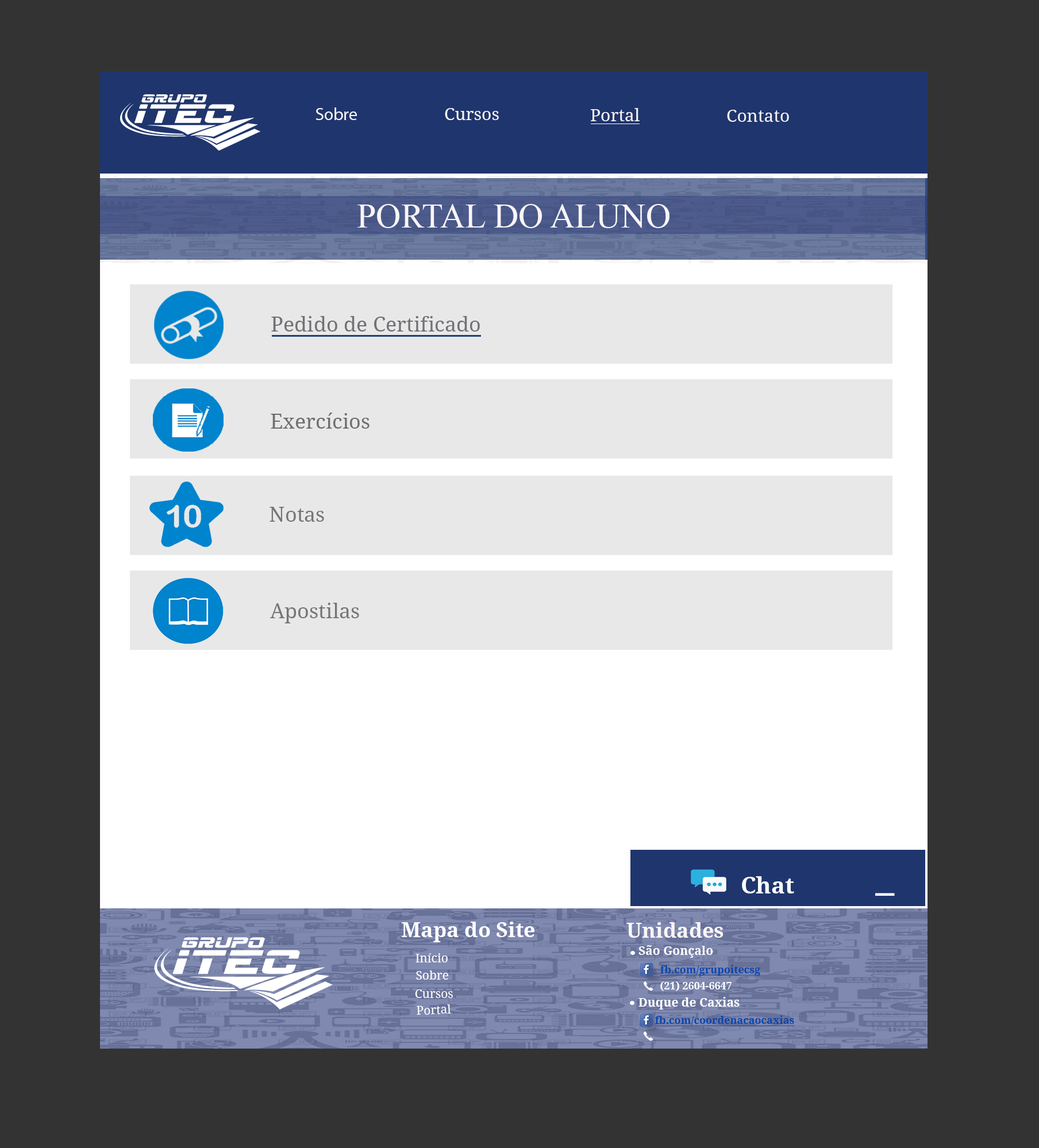
<style>
.page{position:relative;width:1039px;height:1148px;background:#333333}
.page>*{position:absolute;margin:0}
.t1{font:17.2px "MyriadPro-Regular";color:#f9f5f5}
.t2{font:17.2px "DroidSerif";color:#f9f5f5}
.t3{font:34.5px "TimesNewRomanPSMT";color:#f9f5f5}
.t4{font:20.7px "DroidSerif";color:#707173}
.t5{font:20.7px "DroidSerif";color:#6d6e70}
.t6{font:20.7px "DroidSerif";color:#757578}
.t7{font:23px "DroidSerif-Bold";color:#fdfdfd}
.t8{font:41.4px "DroidSerif-Bold";color:#fdfdfd}
.t9{font:20.7px "DroidSerif-Bold";color:#fdfdfe}
.t10{font:20.7px "DroidSerif-Bold";color:#f9f5f5}
.t11{font:12.1px "DroidSerif";color:#fdfdfe}
.t12{font:12.1px "DroidSerif-Bold";color:#fdfdfe}
.t13{font:10.3px "DroidSerif-Bold";color:#0645ad;text-decoration:underline}
.t14{font:10.3px "DroidSerif-Bold";color:#ffffff}
.t15{font:12.1px "DroidSerif-Bold";color:#ffffff}
</style>
<div class="page">
<p class="t1" style="left:315px;top:107px;width:42px;height:13px">Sobre</p>
<p class="t2" style="left:445px;top:108px;width:54px;height:12px">Cursos</p>
<p class="t2" style="left:591px;top:108px;width:48px;height:13px">Portal</p>
<p class="t2" style="left:727px;top:110px;width:62px;height:12px">Contato</p>
<p class="t3" style="left:357px;top:204px;width:312px;height:24px">PORTAL DO ALUNO</p>
<p class="t4" style="left:271px;top:316px;width:209px;height:16px">Pedido de Certificado</p>
<p class="t5" style="left:271px;top:413px;width:98px;height:16px">Exercícios</p>
<p class="t6" style="left:269px;top:507px;width:55px;height:15px">Notas</p>
<p class="t6" style="left:270px;top:603px;width:89px;height:20px">Apostilas</p>
<p class="t7" style="left:742px;top:876px;width:52px;height:17px">Chat</p>
<p class="t8" style="left:875px;top:893px;width:20px;height:3px">_</p>
<p class="t9" style="left:402px;top:922px;width:132px;height:20px">Mapa do Site</p>
<p class="t10" style="left:626px;top:922px;width:97px;height:16px">Unidades</p>
<p class="t11" style="left:415px;top:953px;width:33px;height:9px">Início</p>
<p class="t12" style="left:638px;top:945px;width:75px;height:13px">São Gonçalo</p>
<p class="t13" style="left:660px;top:965px;width:101px;height:11px">fb.com/grupoitecsg</p>
<p class="t11" style="left:416px;top:970px;width:33px;height:10px">Sobre</p>
<p class="t11" style="left:415px;top:989px;width:38px;height:9px">Cursos</p>
<p class="t14" style="left:660px;top:981px;width:71px;height:10px">(21) 2604-6647</p>
<p class="t15" style="left:638px;top:997px;width:101px;height:12px">Duque de Caxias</p>
<p class="t11" style="left:417px;top:1004px;width:34px;height:11px;rotate:-2deg">Portal</p>
<p class="t13" style="left:654px;top:1015px;width:141px;height:11px">fb.com/coordenacaocaxias</p>
</div>
